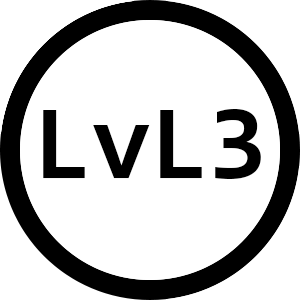
<style>
.page{position:relative;width:300px;height:300px;background:#ffffff}
.page>*{position:absolute;margin:0}
.t1{font:106px "Consolas-Bold";color:#000000}
</style>
<div class="page">
<p class="t1" style="left:43px;top:109px;width:218px;height:70px">LvL3</p>
</div>
